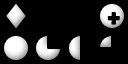
<style>
.page{position:relative;width:128px;height:64px;background:#000000}
.page>*{position:absolute;margin:0}
.t1{font:26px "BerlinSansFBDemi-Bold";color:#000000;font-weight:bold}
</style>
<div class="page">
<p class="t1" style="left:107px;top:12px;width:13px;height:13px">+</p>
</div>
